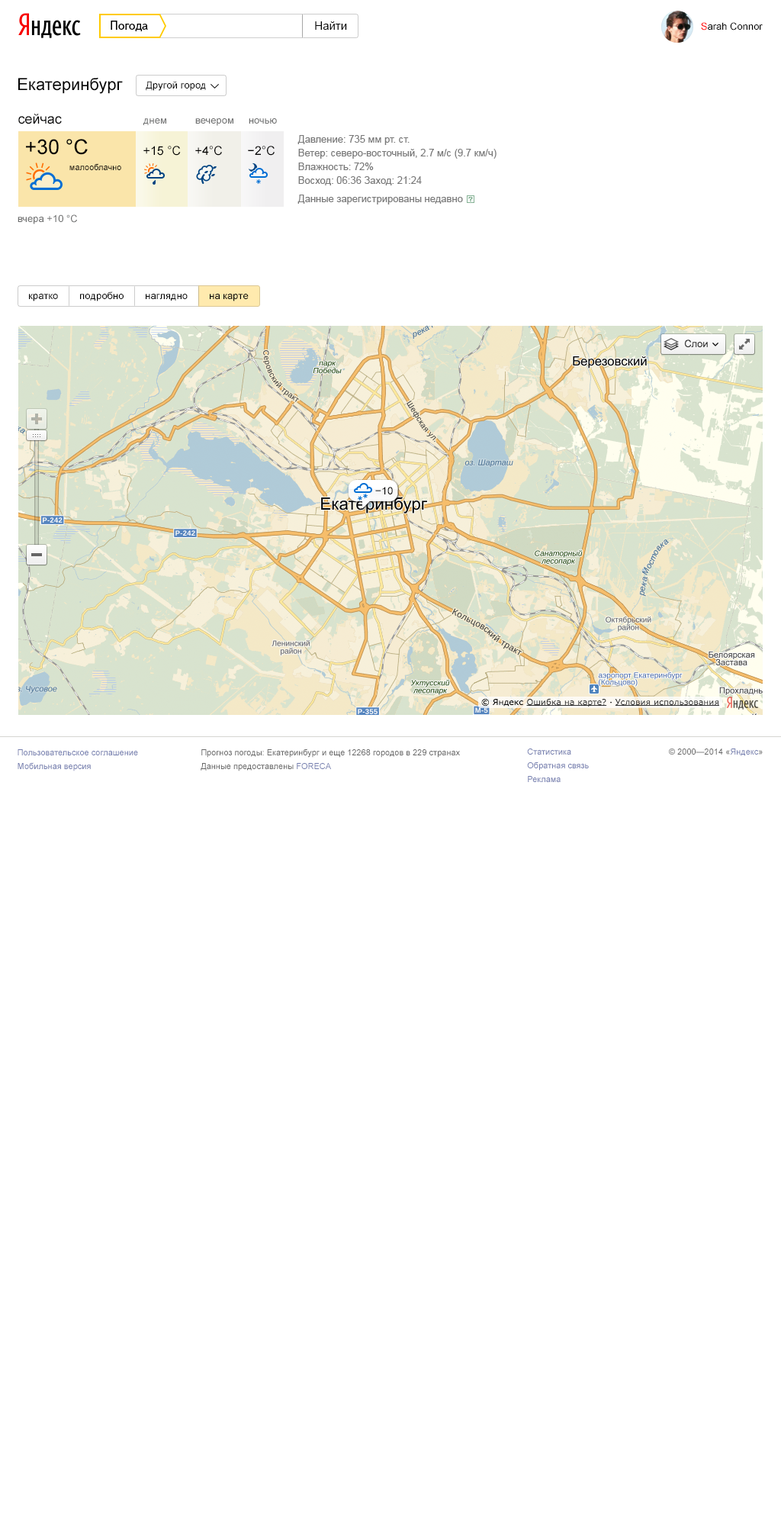
<style>
.page{position:relative;width:781px;height:1526px;background:#ffffff}
.page>*{position:absolute;margin:0}
.t1{font:12.2px "TextbookNew-Regular";color:#000000}
.t2{font:11.4px "ArialMT";color:#000000}
.t3{font:9.9px "ArialMT";color:#000000}
.t4{font:9.9px "ArialMT";color:#ff0000}
.t5{font:16.8px "ArialMT";color:#000000}
.t6{font:13.7px "ArialMT";color:#000000}
.t7{font:9.9px "ArialMT";color:#6d6e6e}
.t8{font:9.9px/13.7px "ArialMT";color:#797979}
.t9{font:9.9px/18.3px "ArialMT";color:#797979}
.t10{font:20.6px "ArialMT";color:#000000}
.t11{font:12.2px "ArialMT";color:#000000}
.t12{font:8.4px "ArialMT";color:#000000}
.t13{font:10.7px "ArialMT";color:#000000}
.t14{font:8.4px/13.7px "ArialMT";color:#747eaf}
.t15{font:8.4px/13.7px "ArialMT";color:#666666}
.t16{font:8.4px "ArialMT";color:#666666}
.t17{font:8.4px "ArialMT";color:#747eaf}
</style>
<div class="page">
<p class="t1" style="left:111px;top:21px;width:37px;height:10px">Погода</p>
<p class="t2" style="left:315px;top:21px;width:32px;height:9px">Найти</p>
<p class="t3" style="left:701px;top:22px;width:62px;height:9px"><span class="t4">S</span>arah Connor</p>
<p class="t5" style="left:18px;top:78px;width:105px;height:16px">Екатеринбург</p>
<p class="t3" style="left:146px;top:81px;width:60px;height:10px">Другой город</p>
<p class="t6" style="left:18px;top:114px;width:44px;height:10px">сейчас</p>
<p class="t7" style="left:143px;top:118px;width:23px;height:7px">днем</p>
<p class="t7" style="left:195px;top:118px;width:38px;height:8px">вечером</p>
<p class="t7" style="left:249px;top:118px;width:28px;height:6px">ночью</p>
<p class="t8" style="left:298px;top:135px;width:199px;height:69px">Давление: 735 мм рт. ст.<br>Ветер: северо-восточный, 2.7 м/с (9.7 км/ч)<br>Влажность: 72%<br>Восход: 06:36 Заход: 21:24<br><span class="t9">Данные зарегистрированы недавно</span></p>
<p class="t10" style="left:26px;top:139px;width:62px;height:16px">+30 °C</p>
<p class="t11" style="left:143px;top:146px;width:38px;height:10px">+15 °C</p>
<p class="t11" style="left:195px;top:146px;width:27px;height:10px">+4°C</p>
<p class="t11" style="left:248px;top:146px;width:27px;height:10px">−2°C</p>
<p class="t12" style="left:69px;top:163px;width:52px;height:7px">малооблачно</p>
<p class="t7" style="left:18px;top:214px;width:59px;height:10px">вчера +10 °C</p>
<p class="t3" style="left:29px;top:294px;width:29px;height:7px">кратко</p>
<p class="t3" style="left:80px;top:291px;width:44px;height:10px">подробно</p>
<p class="t3" style="left:146px;top:294px;width:42px;height:7px">наглядно</p>
<p class="t3" style="left:210px;top:294px;width:39px;height:7px">на карте</p>
<p class="t13" style="left:375px;top:487px;width:18px;height:7px">−10</p>
<p class="t14" style="left:18px;top:749px;width:120px;height:22px">Пользовательское соглашение<br>Мобильная версия</p>
<p class="t15" style="left:201px;top:749px;width:259px;height:22px">Прогноз погоды: Екатеринбург и еще 12268 городов в 229 странах<br>Данные предоставлены <span class="t14">FORECA</span></p>
<p class="t14" style="left:527px;top:749px;width:62px;height:33px">Статистика <br>Обратная связь <br>Реклама</p>
<p class="t16" style="left:669px;top:749px;width:94px;height:7px">© 2000—2014 «<span class="t17">Яндекс</span>»</p>
</div>
